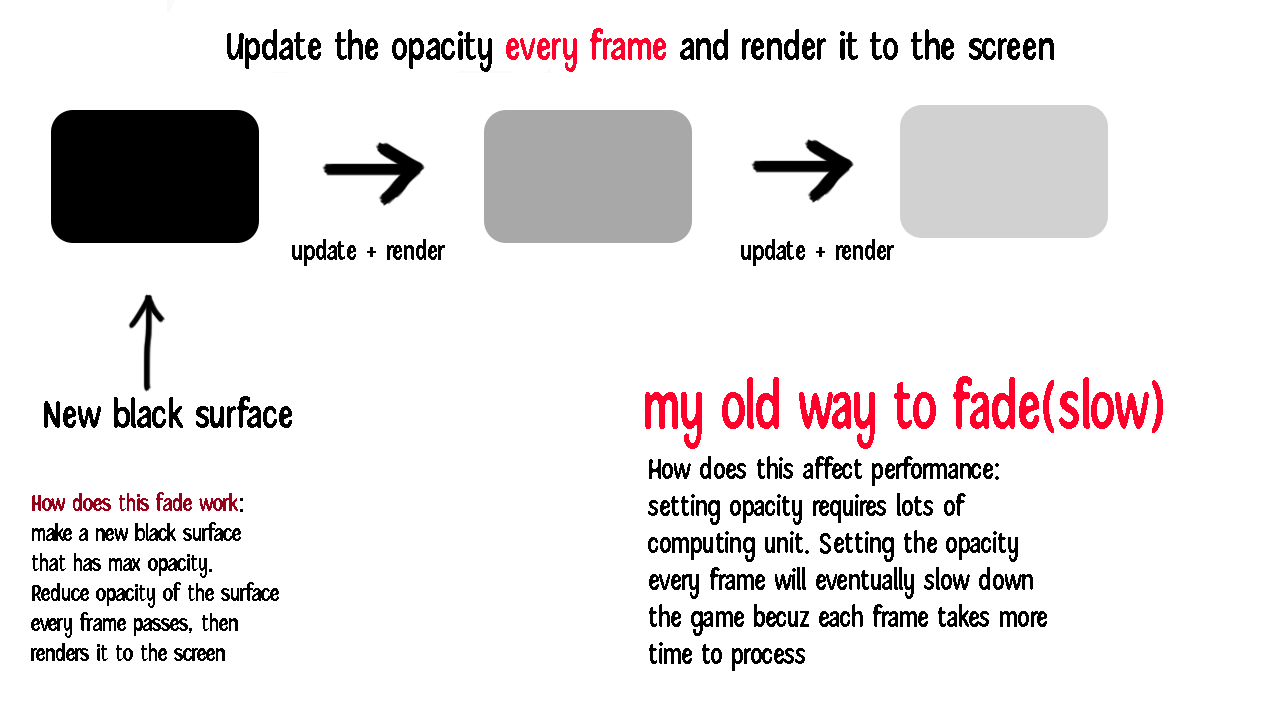
<style>
.page{position:relative;width:1280px;height:720px;background:#ffffff}
.page>*{position:absolute;margin:0}
.t1{font:41.9px "SummaryNotes-Regular";color:#000000}
.t2{font:41.9px "SummaryNotes-Regular";color:#ff002a}
.t3{font:28.6px "SummaryNotes-Regular";color:#000000}
.t4{font:70.8px "SummaryNotes-Regular";color:#ff002a;scale:0.86 1}
.t5{font:30.9px "SummaryNotes-Regular";color:#000000}
.t6{font:25px "SummaryNotes-Regular";color:#000000}
.t7{font:25px "SummaryNotes-Regular";color:#970019}
</style>
<div class="page">
<p class="t1" style="left:227px;top:28px;width:827px;height:44px">Update the opacity <span class="t2">every frame</span> and render it to the screen</p>
<p class="t3" style="left:292px;top:239px;width:153px;height:27px">update + render</p>
<p class="t3" style="left:741px;top:239px;width:153px;height:27px">update + render</p>
<p class="t4" style="left:645px;top:376px;width:518px;height:73px">my old way to fade(slow)</p>
<p class="t1" style="left:44px;top:396px;width:248px;height:32px">New black surface</p>
<p class="t5" style="left:648px;top:456px;width:399px;height:215px">How does this affect performance:<br>setting opacity requires lots of <br>computing unit. Setting the opacity<br>every frame will eventually slow down<br>the game becuz each frame takes more<br>time to process</p>
<p class="t6" style="left:31px;top:492px;width:248px;height:169px"><span class="t7">How does this fade work</span>:<br>make a new black surface<br>that has max opacity.<br>Reduce opacity of the surface<br>every frame passes, then<br>renders it to the screen</p>
</div>
